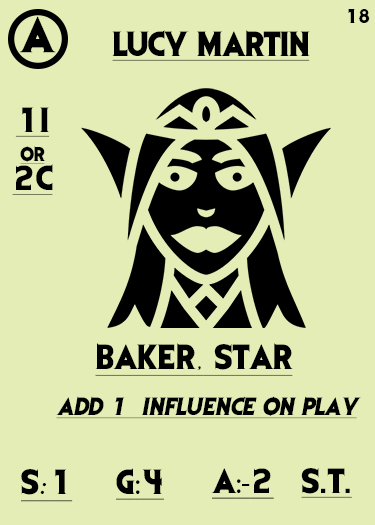
<style>
.page{position:relative;width:375px;height:525px;background:#e3edb5}
.page>*{position:absolute;margin:0}
.t1{font:41.7px "EvilDead";letter-spacing:-0.05em;color:#000000}
.t2{font:16.7px "EvilDead";letter-spacing:-0.05em;color:#000000}
.t3{font:29.2px "EvilDead";letter-spacing:-0.025em;color:#000000;text-decoration:underline}
.t4{font:29.2px/29.2px "EvilDead";color:#000000;text-decoration:underline}
.t5{font:16.7px/29.2px "EvilDead";color:#000000;text-decoration:underline}
.t6{font:29.2px "EvilDead";color:#000000;text-decoration:underline}
.t7{font:29.2px "Fadli-Script";color:#000000;text-decoration:underline}
.t8{font:20.8px "EvilDead";color:#000000;font-style:italic;text-decoration:underline}
.t9{font:29.2px "MyriadPro-Regular";color:#000000;text-decoration:underline}
</style>
<div class="page">
<p class="t1" style="left:19px;top:16px;width:37px;height:37px">A</p>
<p class="t2" style="left:348px;top:9px;width:22px;height:14px">18</p>
<p class="t3" style="left:112px;top:30px;width:198px;height:31px">LUCY MARTIN</p>
<p class="t4" style="left:12px;top:107px;width:41px;height:88px;text-align:center">1I<br><span class="t5">or<br></span>2C</p>
<p class="t6" style="left:95px;top:343px;width:198px;height:33px">BAKER<span class="t7">,</span> STAR</p>
<p class="t8" style="left:56px;top:396px;width:305px;height:23px">Add 1  influence on play</p>
<p class="t6" style="left:21px;top:469px;width:52px;height:33px">S<span class="t7">:</span>1</p>
<p class="t6" style="left:116px;top:468px;width:49px;height:32px">G<span class="t9">:</span>4</p>
<p class="t9" style="left:211px;top:468px;width:63px;height:31px"><span class="t6">A</span>:-<span class="t6">2</span></p>
<p class="t6" style="left:301px;top:468px;width:51px;height:30px">S.T.</p>
</div>
